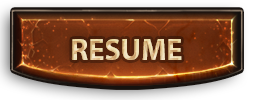
<style>
.page{position:relative;width:254px;height:100px}
.page>*{position:absolute;margin:0}
.t1{font:30.2px "MyriadPro-Bold";text-transform:uppercase}
</style>
<div class="page">
<p class="t1" style="left:72px;top:39px;width:110px;height:21px">resume</p>
<p class="t1" style="left:72px;top:39px;width:110px;height:21px">resume</p>
<p class="t1" style="left:72px;top:39px;width:110px;height:21px">resume</p>
</div>
